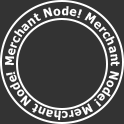
<style>
.page{position:relative;width:124px;height:124px;background:#333333}
.page>*{position:absolute;margin:0}
.t1{font:12px "Verdana-Bold";color:#ffffff;scale:0.92 1}
</style>
<div class="page">
<p class="t1" style="left:4px;top:6px;width:116px;height:115px;text-align:center">Merchant Node! Merchant Node! Merchant Node!</p>
</div>
